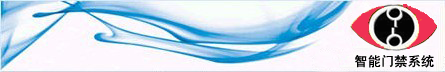
<style>
.page{position:relative;width:445px;height:72px}
.page>*{position:absolute;margin:0}
.t1{font:13.3px "SimHei";color:#000000}
</style>
<div class="page">
<p class="t1" style="left:355px;top:55px;width:79px;height:13px">智能门禁系统</p>
</div>
